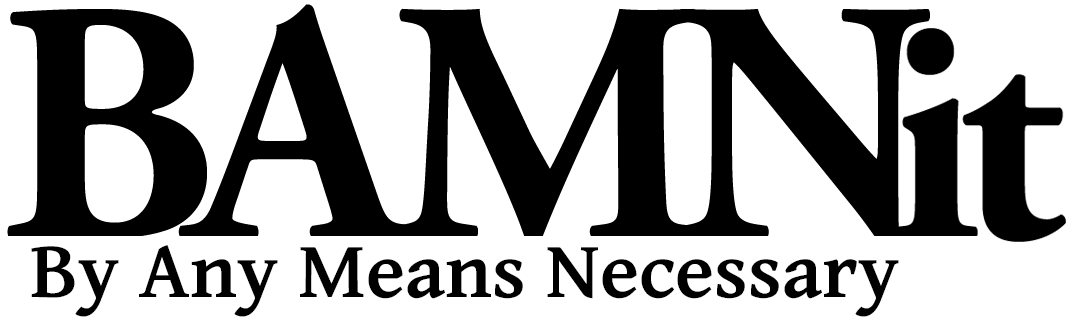
<style>
.page{position:relative;width:1072px;height:320px;background:#ffffff}
.page>*{position:absolute;margin:0}
.t1{font:80.6px "GentiumBasic-Bold";color:#000000}
</style>
<div class="page">
<p class="t1" style="left:31px;top:245px;width:868px;height:72px">By Any Means Necessary</p>
</div>
